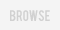
<style>
.page{position:relative;width:60px;height:30px;background:#f4f4f4}
.page>*{position:absolute;margin:0}
.t1{font:12px "Bebas";color:#d1d1d1}
</style>
<div class="page">
<p class="t1" style="left:10px;top:10px;width:40px;height:11px">BROWSE</p>
</div>
